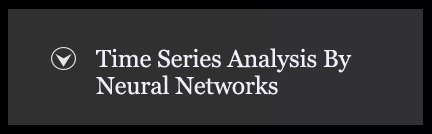
<style>
.page{position:relative;width:432px;height:134px;background:#313030}
.page>*{position:absolute;margin:0}
.t1{font:24.5px/9px "Georgia";letter-spacing:-0.005em;color:#f0effb}
</style>
<div class="page">
<p class="t1" style="left:96px;top:48px;width:256px;height:47px">Time Series Analysis By <br><br><br>Neural Networks</p>
</div>
